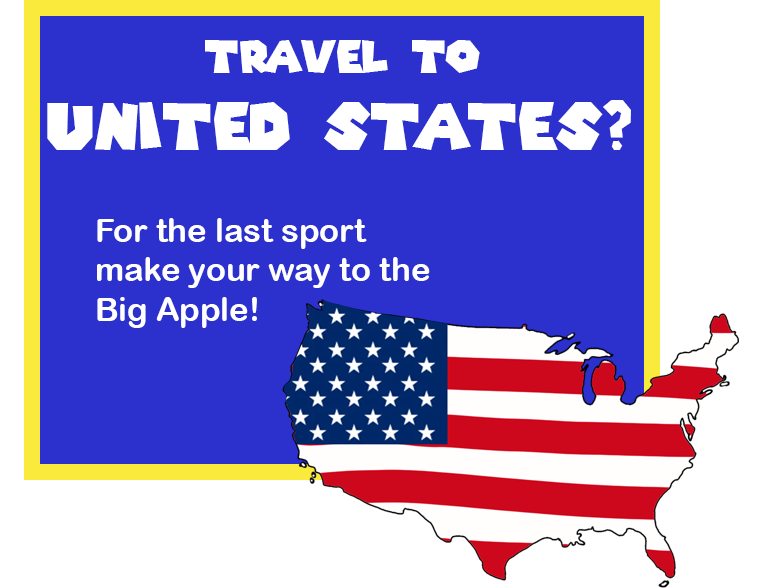
<style>
.page{position:relative;width:772px;height:588px;background:#2c30cd}
.page>*{position:absolute;margin:0}
.t1{font:64.5px "SuperMarioGalaxy";color:#ffffff}
.t2{font:43.6px "SuperMarioGalaxy";color:#ffffff}
.t3{font:32.8px "ArialRoundedMTBold";color:#ffffff}
</style>
<div class="page">
<p class="t1" style="left:47px;top:40px;width:584px;height:110px;text-align:center"><span class="t2">Travel to <br></span>United STates?</p>
<p class="t3" style="left:97px;top:218px;width:333px;height:110px">For the last sport<br>make your way to the<br>Big Apple!</p>
</div>
